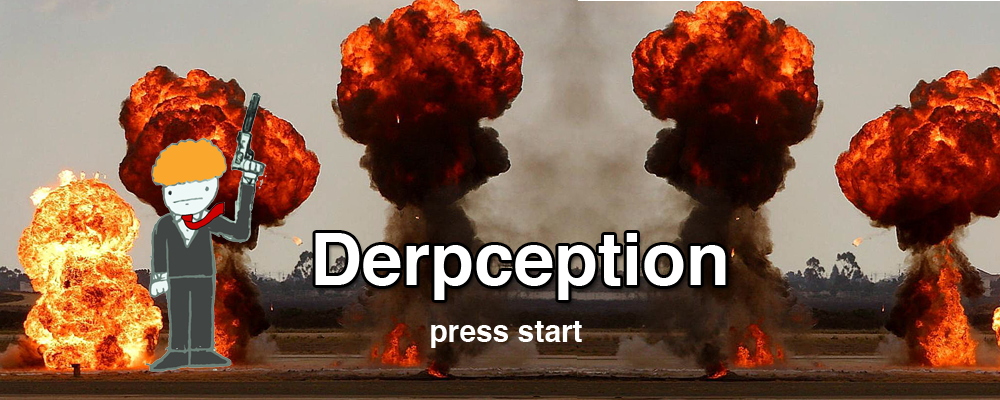
<style>
.page{position:relative;width:1000px;height:400px}
.page>*{position:absolute;margin:0}
.t1{font:72px "Helvetica-Bold";color:#ffffff}
.t2{font:30px "Helvetica-Bold";color:#ffffff}
</style>
<div class="page">
<p class="t1" style="left:315px;top:233px;width:411px;height:67px">Derpception</p>
<p class="t2" style="left:431px;top:321px;width:151px;height:27px">press start</p>
</div>
